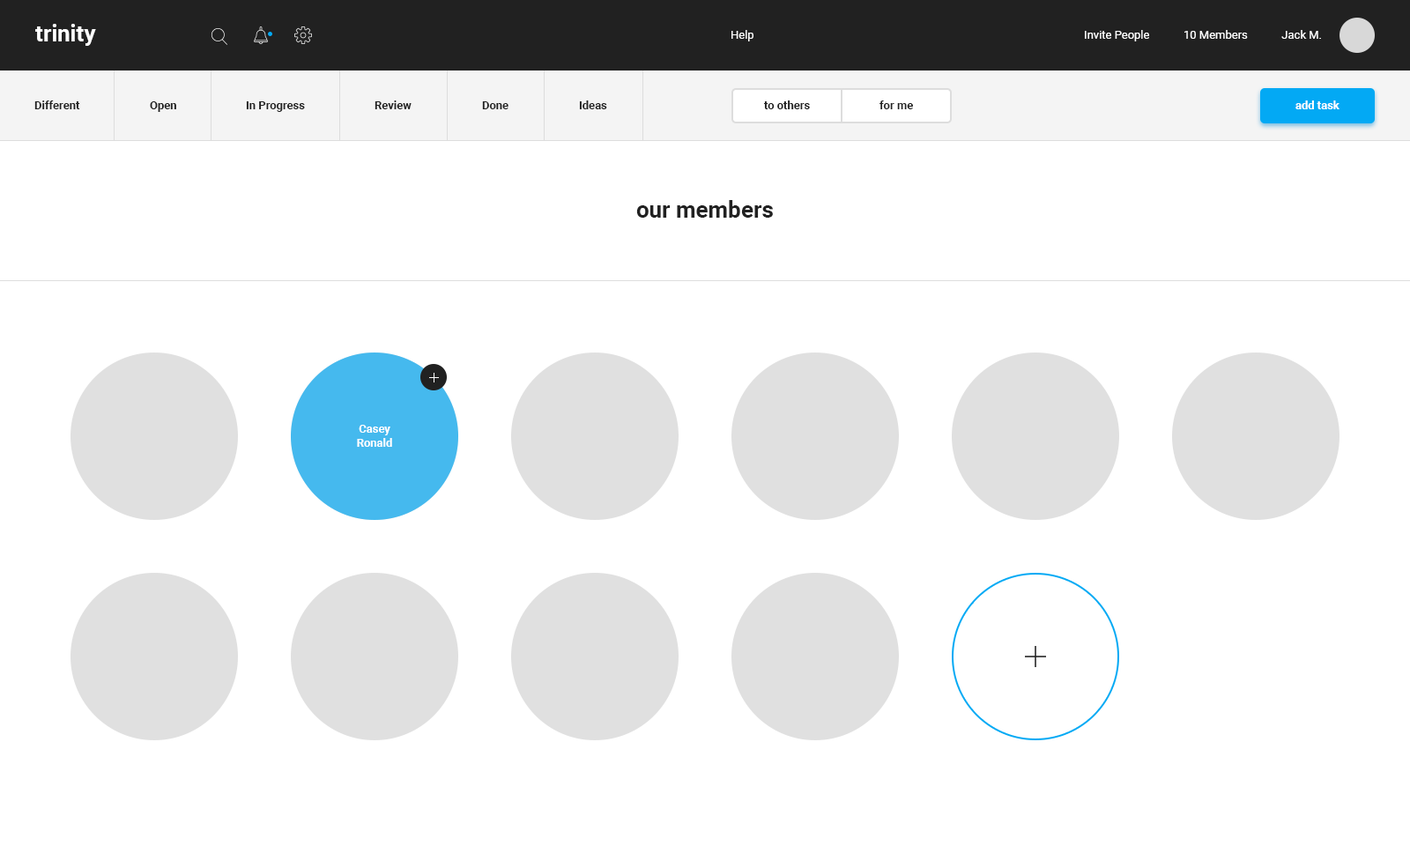
<style>
.page{position:relative;width:1410px;height:846px;background:#ffffff}
.page>*{position:absolute;margin:0}
.t1{font:22.9px "Roboto-Bold";color:#ffffff}
.t2{font:11.5px "Roboto-Regular";color:#ffffff}
.t3{font:11.5px "Roboto-Bold";color:#212121}
.t4{font:11.5px "Roboto-Bold";color:#ffffff}
.t5{font:22.9px "Roboto-Bold";color:#212121}
.t6{font:11.5px/14.1px "Roboto-Bold";color:#ffffff}
</style>
<div class="page">
<p class="t1" style="left:35px;top:24px;width:61px;height:22px">trinity</p>
<p class="t2" style="left:731px;top:30px;width:22px;height:11px">Help</p>
<p class="t2" style="left:1085px;top:30px;width:236px;height:11px">Invite People            10 Members            Jack M.</p>
<p class="t3" style="left:34px;top:100px;width:46px;height:9px">Different</p>
<p class="t3" style="left:150px;top:101px;width:26px;height:11px">Open</p>
<p class="t3" style="left:246px;top:101px;width:59px;height:11px">In Progress</p>
<p class="t3" style="left:374px;top:100px;width:37px;height:9px">Review</p>
<p class="t3" style="left:482px;top:101px;width:26px;height:8px">Done</p>
<p class="t3" style="left:579px;top:100px;width:28px;height:9px">Ideas</p>
<p class="t3" style="left:763px;top:100px;width:47px;height:9px">to others</p>
<p class="t3" style="left:879px;top:100px;width:34px;height:9px">for me</p>
<p class="t4" style="left:1295px;top:100px;width:44px;height:9px">add task</p>
<p class="t5" style="left:636px;top:200px;width:137px;height:18px">our members</p>
<p class="t6" style="left:357px;top:425px;width:35px;height:22px;text-align:center">Casey <br>Ronald</p>
</div>
